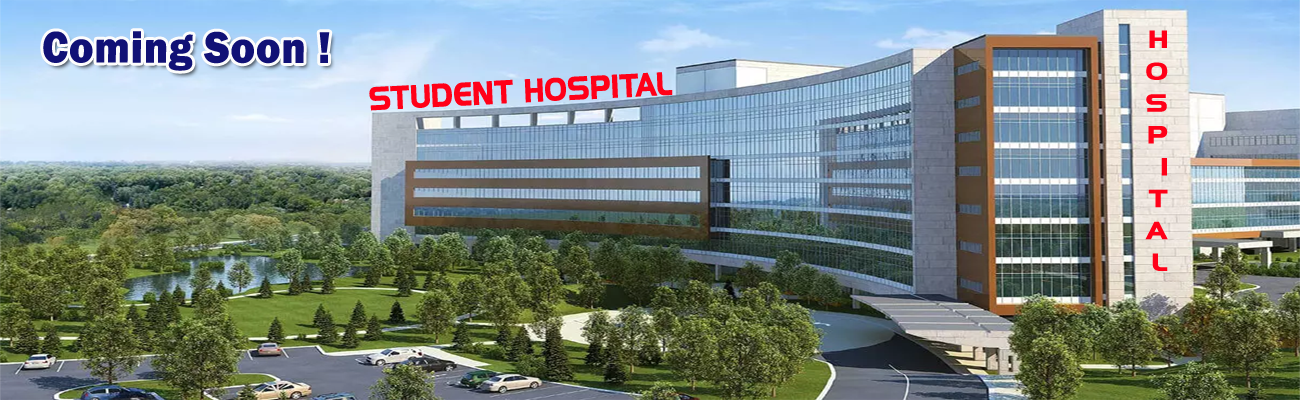
<style>
.page{position:relative;width:1300px;height:400px}
.page>*{position:absolute;margin:0}
.t1{font:22.6px/31.8px "HighlandGothicFLF-Bold";letter-spacing:0.02em;color:#ff0018;scale:1.19 1}
.t2{font:46px "FranklinGothic-Heavy";letter-spacing:0.02em;color:#111176;scale:0.9 1}
.t3{font:30px "HighlandGothicFLF-Bold";letter-spacing:0.02em;color:#ff0018;scale:0.9 1}
</style>
<div class="page">
<p class="t1" style="left:1145px;top:30px;width:23px;height:241px;text-align:right">H<br>O<br>S<br>P<br>I<br>T<br>A<br>L</p>
<p class="t2" style="left:43px;top:31px;width:287px;height:40px">Coming Soon !</p>
<p class="t3" style="left:369px;top:72px;width:304px;height:39px;rotate:-3deg">STUDENT HOSPITAL</p>
</div>
